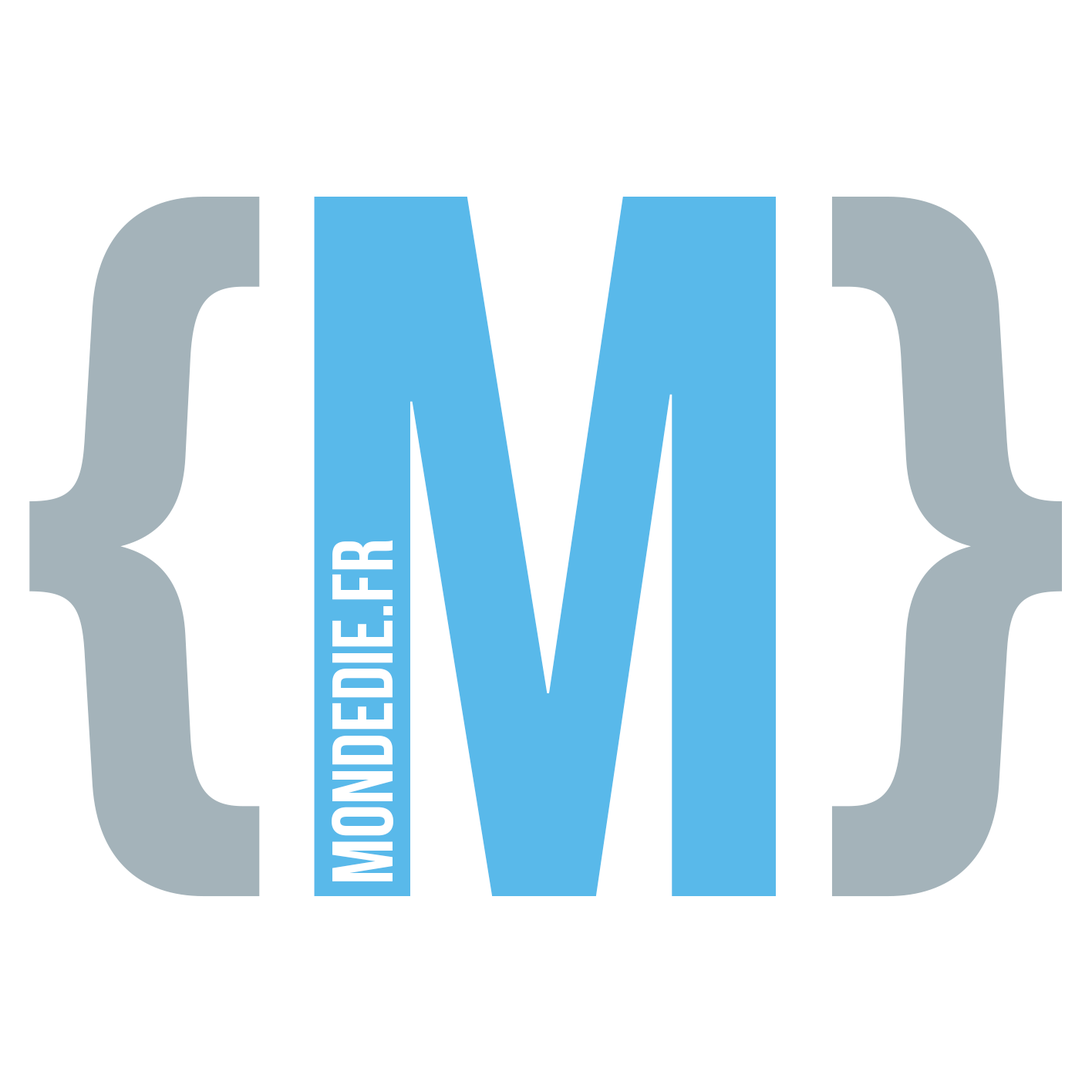
<style>
.page{position:relative;width:1092px;height:1092px;background:#ffffff}
.page>*{position:absolute;margin:0}
.t1{font:999.4px "BebasNeue";color:#a4b3ba}
.t2{font:999.4px "BebasNeue";color:#59b9ea}
.t3{font:85.6px "BebasNeue";color:#ffffff}
</style>
<div class="page">
<p class="t1" style="left:29px;top:197px;width:1033px;height:700px">{<span class="t2">M</span>}</p>
<p class="t3" style="left:332px;top:540px;width:61px;height:341px;rotate:-90deg">mondedie.fr</p>
</div>
